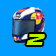
<style>
.page{position:relative;width:56px;height:56px;background:#009cff}
.page>*{position:absolute;margin:0}
.t1{font:16px "DreamMMA";color:#baf000}
</style>
<div class="page">
<p class="t1" style="left:26px;top:34px;width:19px;height:11px">2</p>
</div>
